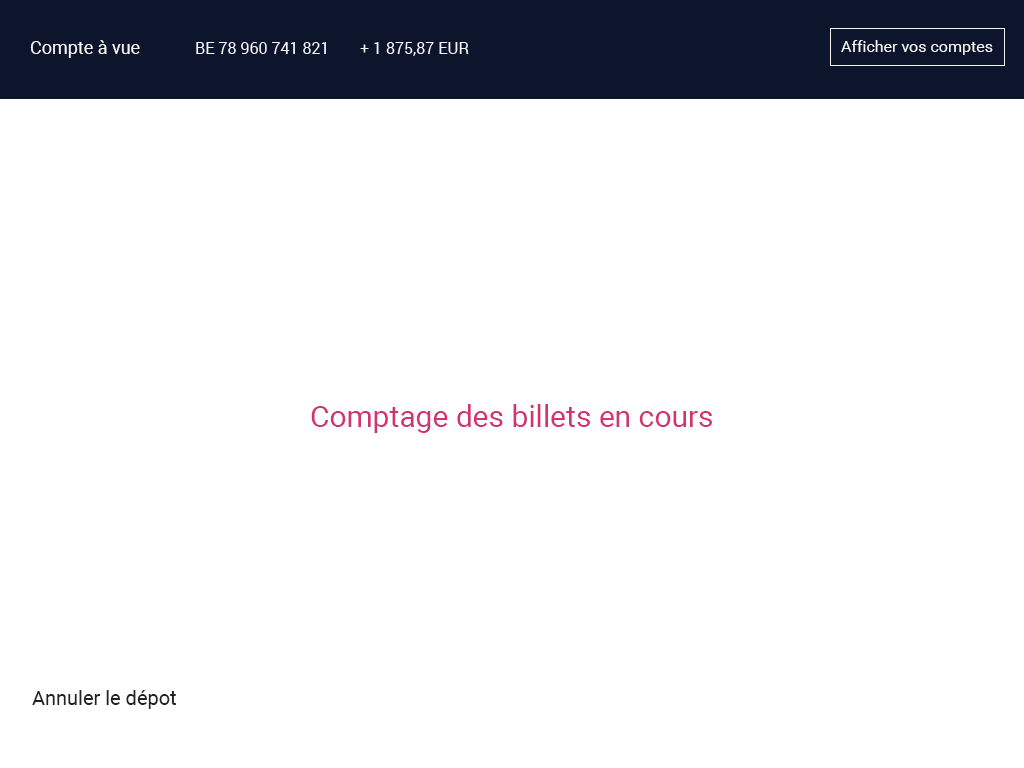
<style>
.page{position:relative;width:1024px;height:768px;background:#ffffff}
.page>*{position:absolute;margin:0}
.t1{font:18px "Roboto-Regular";color:#f5f5f5}
.t2{font:16px "Roboto-Regular";color:#f5f5f5}
.t3{font:30px "Roboto-Regular";color:#d1346e}
.t4{font:20px "Roboto-Regular";color:#222222}
</style>
<div class="page">
<p class="t1" style="left:30px;top:40px;width:110px;height:18px">Compte à vue</p>
<p class="t2" style="left:841px;top:40px;width:152px;height:15px">Afficher vos comptes</p>
<p class="t2" style="left:196px;top:42px;width:130px;height:12px">BE 78 960 741 821</p>
<p class="t2" style="left:360px;top:42px;width:109px;height:14px">+ 1 875,87 EUR</p>
<p class="t3" style="left:311px;top:404px;width:401px;height:29px">Comptage des billets en cours</p>
<p class="t4" style="left:32px;top:690px;width:144px;height:19px">Annuler le dépot</p>
</div>
